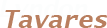
<style>
.page{position:relative;width:107px;height:28px;background:#ffffff}
.page>*{position:absolute;margin:0}
.t1{font:25px "LucidaSans-TypewriterBoldOblique";color:#b97f5f}
</style>
<div class="page">
<p class="t1" style="left:5px;top:10px;width:102px;height:18px">Tavares</p>
</div>
